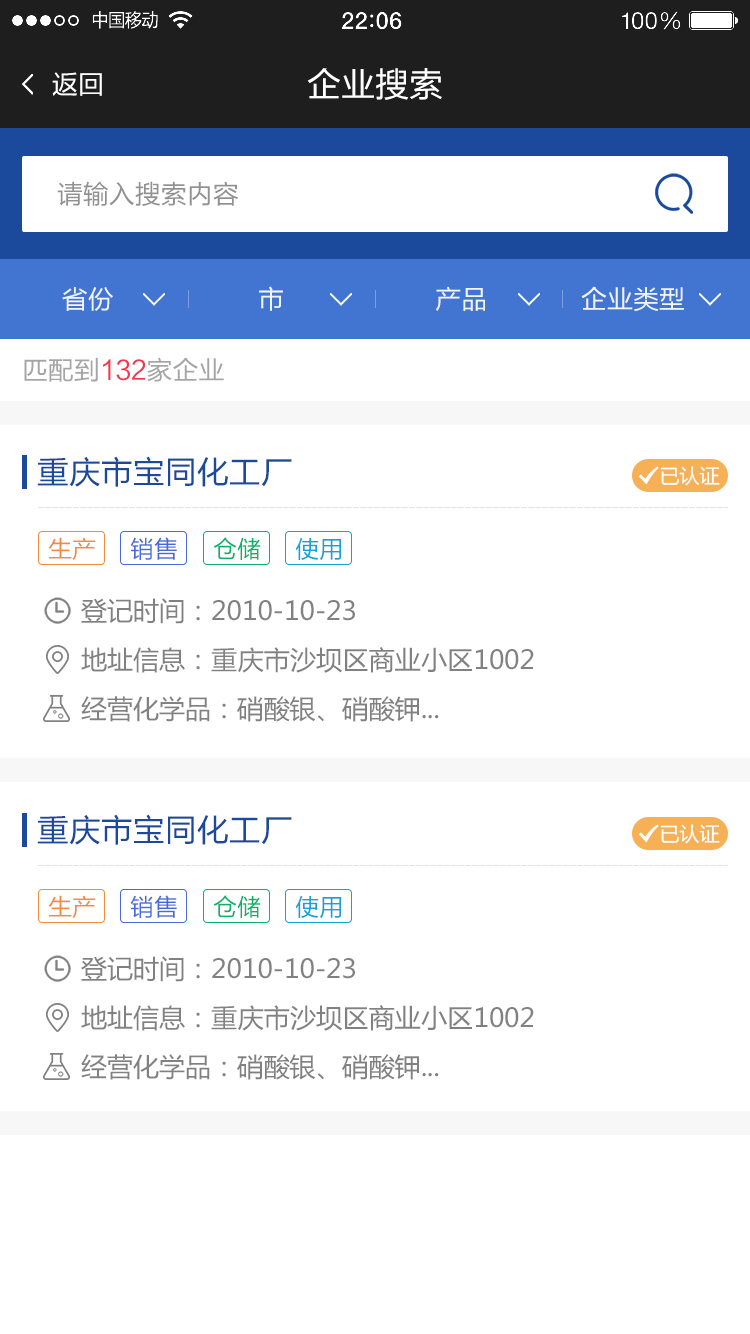
<style>
.page{position:relative;width:750px;height:1334px;background:#ffffff}
.page>*{position:absolute;margin:0}
.t1{font:26px "FZLTHJW--GB1-0";color:#ffffff}
.t2{font:34px "FZLTHJW--GB1-0";color:#ffffff}
.t3{font:26px "FZLTHJW--GB1-0";color:#919191}
.t4{font:26px "FZLTHJW--GB1-0";color:#f1f4f9}
.t5{font:26px "FZLTHJW--GB1-0";color:#a5a5a5}
.t6{font:26px "FZLTHJW--GB1-0";color:#f4374e}
.t7{font:32px "FZLTHJW--GB1-0";color:#1b4a9c}
.t8{font:20px "MicrosoftYaHei";color:#ffffff}
.t9{font:24px "FZLTHJW--GB1-0";color:#ef8b42;text-transform:uppercase}
.t10{font:24px "FZLTHJW--GB1-0";color:#486ad9;text-transform:uppercase}
.t11{font:24px "FZLTHJW--GB1-0";color:#11ae6d;text-transform:uppercase}
.t12{font:24px "FZLTHJW--GB1-0";color:#17a2d6;text-transform:uppercase}
.t13{font:26px "MicrosoftYaHei";color:#818181}
</style>
<div class="page">
<p class="t1" style="left:52px;top:72px;width:50px;height:24px">返回</p>
<p class="t2" style="left:307px;top:68px;width:135px;height:32px">企业搜索</p>
<p class="t3" style="left:57px;top:181px;width:181px;height:25px">请输入搜索内容</p>
<p class="t4" style="left:62px;top:286px;width:622px;height:25px">省份                    市                     产品             企业类型</p>
<p class="t5" style="left:24px;top:357px;width:200px;height:25px">匹配到<span class="t6">132</span>家企业</p>
<p class="t7" style="left:37px;top:456px;width:255px;height:31px">重庆市宝同化工厂</p>
<p class="t8" style="left:660px;top:466px;width:60px;height:20px">已认证</p>
<p class="t9" style="left:48px;top:537px;width:48px;height:23px">生产</p>
<p class="t10" style="left:130px;top:537px;width:47px;height:23px">销售</p>
<p class="t11" style="left:214px;top:537px;width:47px;height:23px">仓储</p>
<p class="t12" style="left:295px;top:537px;width:46px;height:24px">使用</p>
<p class="t13" style="left:81px;top:598px;width:274px;height:26px">登记时间：2010-10-23</p>
<p class="t13" style="left:81px;top:647px;width:453px;height:26px">地址信息：重庆市沙坝区商业小区1002</p>
<p class="t13" style="left:81px;top:696px;width:358px;height:26px">经营化学品：硝酸银、硝酸钾...</p>
<p class="t7" style="left:37px;top:814px;width:255px;height:31px">重庆市宝同化工厂</p>
<p class="t8" style="left:660px;top:824px;width:60px;height:20px">已认证</p>
<p class="t9" style="left:48px;top:895px;width:48px;height:23px">生产</p>
<p class="t10" style="left:130px;top:895px;width:47px;height:23px">销售</p>
<p class="t11" style="left:214px;top:895px;width:47px;height:23px">仓储</p>
<p class="t12" style="left:295px;top:895px;width:46px;height:24px">使用</p>
<p class="t13" style="left:81px;top:956px;width:274px;height:26px">登记时间：2010-10-23</p>
<p class="t13" style="left:81px;top:1005px;width:453px;height:26px">地址信息：重庆市沙坝区商业小区1002</p>
<p class="t13" style="left:81px;top:1054px;width:358px;height:26px">经营化学品：硝酸银、硝酸钾...</p>
</div>
